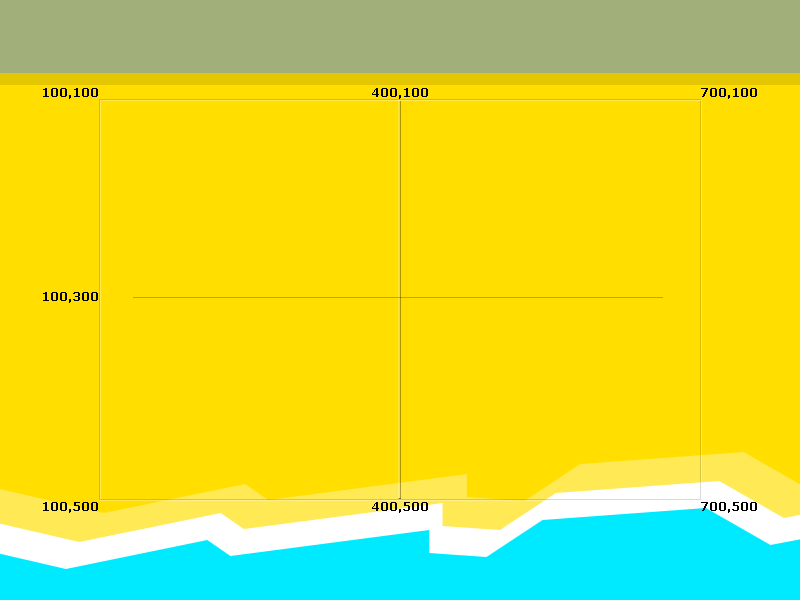
<style>
.page{position:relative;width:800px;height:600px;background:#ffde00}
.page>*{position:absolute;margin:0}
.t1{font:12px "Verdana-Bold";color:#000000}
</style>
<div class="page">
<p class="t1" style="left:43px;top:88px;width:55px;height:11px">100,100</p>
<p class="t1" style="left:372px;top:88px;width:56px;height:11px">400,100</p>
<p class="t1" style="left:701px;top:88px;width:56px;height:11px">700,100</p>
<p class="t1" style="left:43px;top:292px;width:55px;height:11px">100,300</p>
<p class="t1" style="left:43px;top:502px;width:55px;height:11px">100,500</p>
<p class="t1" style="left:372px;top:502px;width:56px;height:11px">400,500</p>
<p class="t1" style="left:701px;top:502px;width:56px;height:11px">700,500</p>
</div>
